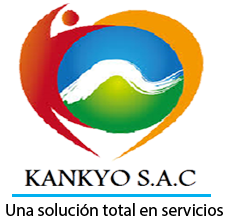
<style>
.page{position:relative;width:230px;height:220px;background:#ffffff}
.page>*{position:absolute;margin:0}
.t1{font:17.3px "MyriadPro-Regular";color:#000000}
</style>
<div class="page">
<p class="t1" style="left:6px;top:203px;width:217px;height:13px">Una solución total en servicios</p>
</div>
